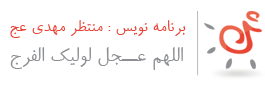
<style>
.page{position:relative;width:265px;height:89px;background:#ffffff}
.page>*{position:absolute;margin:0}
.t1{font:18px "BRoya";color:#e84335}
.t2{font:22px "BRoya";color:#8d8f92}
</style>
<div class="page">
<p class="t1" style="left:10px;top:20px;width:176px;height:18px">برنامه نویس : منتظر مهدی عج</p>
<p class="t2" style="left:10px;top:47px;width:173px;height:23px">اللهم عــجل لولیک الفرج</p>
</div>
